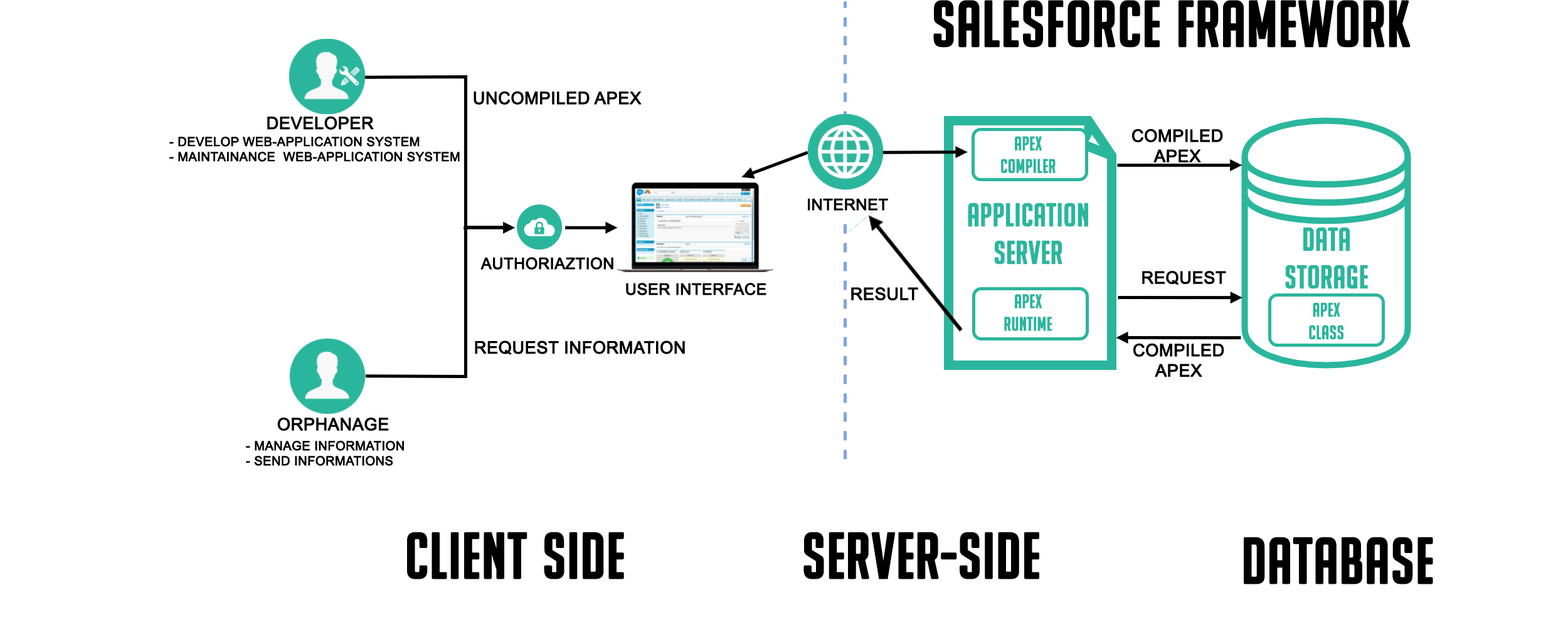
<style>
.page{position:relative;width:1568px;height:627px;background:#ffffff}
.page>*{position:absolute;margin:0}
.t1{font:62.7px "Koverwatch";color:#000000;text-transform:uppercase;font-weight:bold}
.t2{font:16.9px "ArialMT";color:#000000;text-transform:uppercase;font-weight:bold}
.t3{font:12.5px "ArialMT";color:#000000;text-transform:uppercase;font-weight:bold}
.t4{font:18.8px "Koverwatch";color:#2ab69d;text-transform:uppercase;font-weight:bold}
.t5{font:15.7px "ArialMT";color:#000000;text-transform:uppercase;font-weight:bold}
.t6{font:31.4px "Koverwatch";color:#2ab69d;text-transform:uppercase;font-weight:bold}
</style>
<div class="page">
<p class="t1" style="left:933px;top:0px;width:478px;height:48px">Salesforce framework</p>
<p class="t2" style="left:474px;top:91px;width:168px;height:14px">uncompiled apex</p>
<p class="t2" style="left:267px;top:116px;width:107px;height:14px">Developer</p>
<p class="t3" style="left:169px;top:137px;width:291px;height:25px">- develop web-application system<br>- maintainance  web-application system</p>
<p class="t4" style="left:1001px;top:136px;width:55px;height:37px;text-align:center">Apex<br>compiler</p>
<p class="t2" style="left:1132px;top:129px;width:91px;height:33px;text-align:center">compiled<br>apex</p>
<p class="t5" style="left:808px;top:198px;width:80px;height:13px">internet</p>
<p class="t6" style="left:968px;top:203px;width:120px;height:62px;text-align:center">Application<br>server</p>
<p class="t6" style="left:1285px;top:227px;width:83px;height:62px;text-align:center">Data<br>storage</p>
<p class="t5" style="left:480px;top:257px;width:133px;height:13px">Authoriaztion</p>
<p class="t2" style="left:1142px;top:271px;width:84px;height:14px">REQUEST</p>
<p class="t5" style="left:626px;top:283px;width:140px;height:12px">User interface</p>
<p class="t2" style="left:851px;top:287px;width:67px;height:13px">RESULT</p>
<p class="t4" style="left:1004px;top:294px;width:48px;height:37px;text-align:center">apex<br>runtime</p>
<p class="t4" style="left:1309px;top:302px;width:34px;height:38px;text-align:center">apex<br>class</p>
<p class="t2" style="left:475px;top:341px;width:210px;height:14px">REQuEst information</p>
<p class="t2" style="left:1133px;top:343px;width:91px;height:34px;text-align:center">compiled<br>apex</p>
<p class="t2" style="left:277px;top:418px;width:112px;height:13px">ORPHANAGE</p>
<p class="t3" style="left:246px;top:441px;width:158px;height:25px">- Manage information<br>- send informations</p>
<p class="t1" style="left:407px;top:532px;width:217px;height:48px">Client side</p>
<p class="t1" style="left:803px;top:532px;width:236px;height:48px">SErver-side</p>
<p class="t1" style="left:1244px;top:537px;width:189px;height:48px">database</p>
</div>
